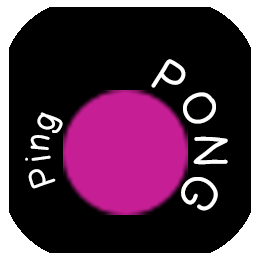
<style>
.page{position:relative;width:265px;height:267px;background:#000000}
.page>*{position:absolute;margin:0}
.t1{font:45.8px "April";color:#ffffff}
.t2{font:33.3px "April";color:#ffffff}
</style>
<div class="page">
<p class="t1" style="left:25px;top:59px;width:203px;height:152px;text-align:center"><span class="t2">             Ping          </span>PONG PONG</p>
</div>
